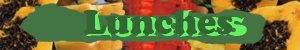
<style>
.page{position:relative;width:300px;height:50px;background:#447444}
.page>*{position:absolute;margin:0}
.t1{font:36px "CooperBlack";color:#336633}
.t2{font:36px "SnapITC-Regular"}
</style>
<div class="page">
<p class="t1" style="left:83px;top:4px;width:151px;height:39px">Lunches</p>
<p class="t2" style="left:85px;top:5px;width:162px;height:41px">Lunches</p>
</div>
